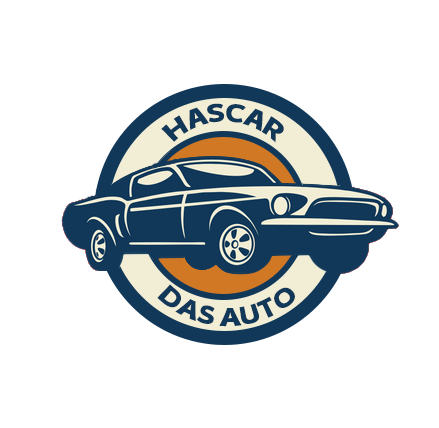
<style>
.page{position:relative;width:439px;height:428px;background:#ffffff}
.page>*{position:absolute;margin:0}
.t1{font:25px "Kardinal-ExtraBold";color:#113859}
</style>
<div class="page">
<p class="t1" style="left:161px;top:103px;width:123px;height:40px">HASCAR</p>
<p class="t1" style="left:157px;top:284px;width:138px;height:43px">DAS AUTO</p>
</div>
